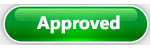
<style>
.page{position:relative;width:151px;height:50px}
.page>*{position:absolute;margin:0}
.t1{font:18px "NirmalaUI-Bold";color:#f3f7f7}
.t2{font:18px "NirmalaUI-Bold"}
</style>
<div class="page">
<p class="t1" style="left:37px;top:15px;width:83px;height:19px">Approved</p>
<p class="t2" style="left:43px;top:16px;width:68px;height:19px">Pending</p>
</div>
